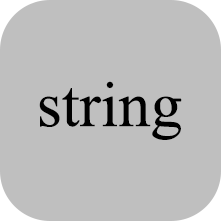
<style>
.page{position:relative;width:221px;height:221px;background:#bfbfbf}
.page>*{position:absolute;margin:0}
.t1{font:63.9px "TimesNewRomanPSMT";color:#000000}
</style>
<div class="page">
<p class="t1" style="left:39px;top:81px;width:143px;height:59px">string</p>
</div>
